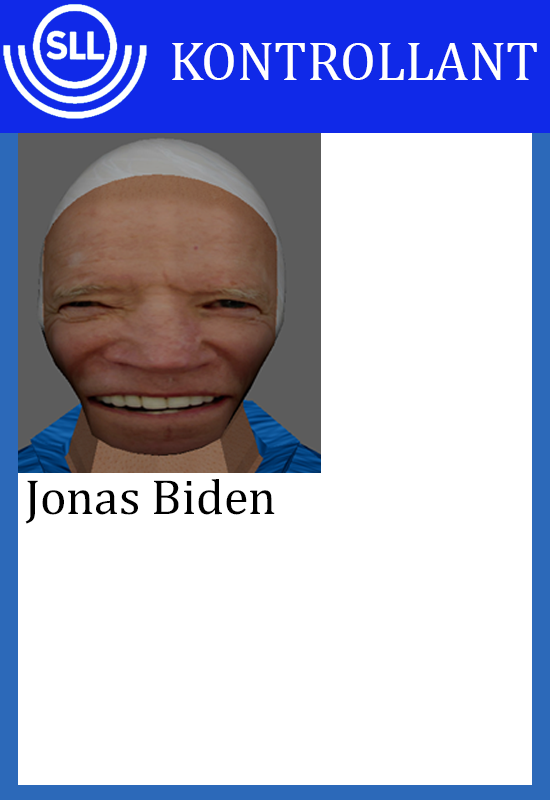
<style>
.page{position:relative;width:550px;height:800px;background:#ffffff}
.page>*{position:absolute;margin:0}
.t1{font:54.8px "CambriaMath";color:#ffffff}
.t2{font:50.1px "CambriaMath";color:#000000}
</style>
<div class="page">
<p class="t1" style="left:172px;top:43px;width:365px;height:37px">KONTROLLANT</p>
<p class="t2" style="left:25px;top:479px;width:250px;height:45px">Jonas Biden</p>
</div>
